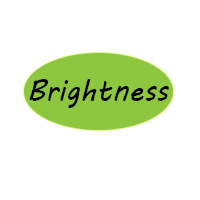
<style>
.page{position:relative;width:200px;height:200px;background:#ffffff}
.page>*{position:absolute;margin:0}
.t1{font:30px "MVBoli";color:#000000}
</style>
<div class="page">
<p class="t1" style="left:29px;top:79px;width:140px;height:29px">Brightness</p>
</div>
